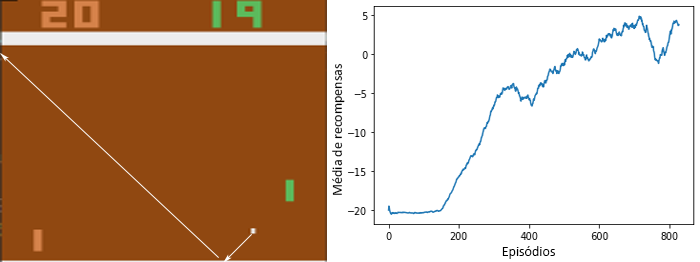
<style>
.page{position:relative;width:700px;height:262px;background:#ffffff}
.page>*{position:absolute;margin:0}
.t1{font:14px "Calibri";color:#000000}
</style>
<div class="page">
<p class="t1" style="left:332px;top:63px;width:13px;height:132px;rotate:-90deg">Média de recompensas</p>
<p class="t1" style="left:502px;top:246px;width:53px;height:13px">Episódios</p>
</div>
